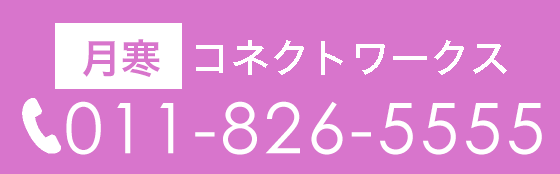
<style>
.page{position:relative;width:560px;height:174px;background:#d875cc}
.page>*{position:absolute;margin:0}
.t1{font:40px "HiraKakuStd-W6";color:#d875cc}
.t2{font:40px "HiraKakuStd-W5";color:#ffffff}
.t3{font:70px "CenturyGothic";letter-spacing:0.06em;color:#ffffff}
</style>
<div class="page">
<p class="t1" style="left:82px;top:39px;width:78px;height:38px">月寒</p>
<p class="t2" style="left:196px;top:40px;width:311px;height:35px">コネクトワークス</p>
<p class="t3" style="left:66px;top:101px;width:476px;height:54px">011-826-5555</p>
</div>
